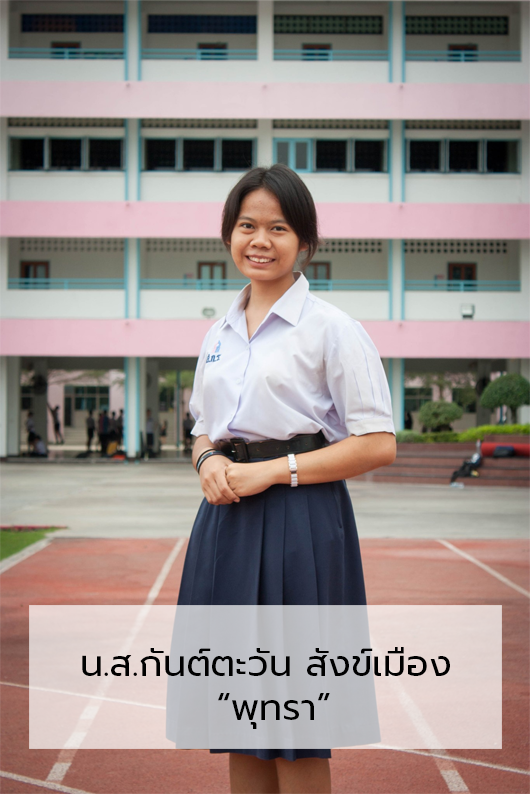
<style>
.page{position:relative;width:530px;height:794px}
.page>*{position:absolute;margin:0}
.t1{font:36.7px "Prompt-Regular";color:#000000}
</style>
<div class="page">
<p class="t1" style="left:82px;top:647px;width:368px;height:82px">น.ส.กันต์ตะวัน สังข์เมือง<br>          “พุทรา”</p>
</div>
